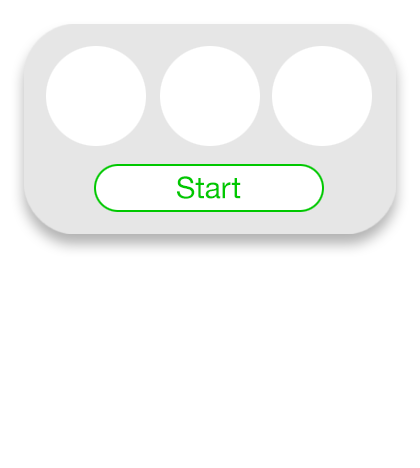
<style>
.page{position:relative;width:420px;height:468px;background:#ffffff}
.page>*{position:absolute;margin:0}
.t1{font:30px "HelveticaNeue";color:#00c800}
</style>
<div class="page">
<p class="t1" style="left:177px;top:176px;width:64px;height:23px">Start</p>
</div>
